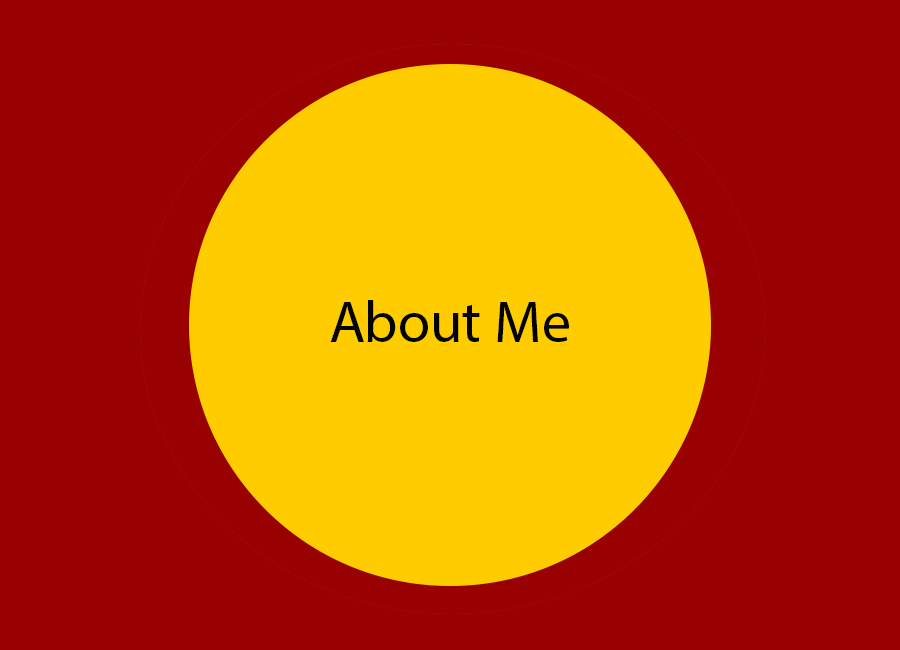
<style>
.page{position:relative;width:900px;height:650px;background:#990100}
.page>*{position:absolute;margin:0}
.t1{font:58.8px "MyriadPro-Regular";color:#020202}
</style>
<div class="page">
<p class="t1" style="left:330px;top:300px;width:239px;height:42px">About Me</p>
</div>
